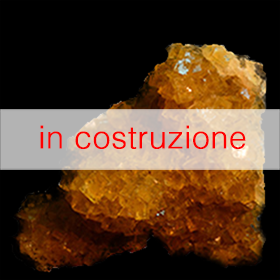
<style>
.page{position:relative;width:280px;height:280px;background:#000000}
.page>*{position:absolute;margin:0}
.t1{font:31.5px "Helvetica-Light";color:#ff0000;font-weight:bold}
</style>
<div class="page">
<p class="t1" style="left:40px;top:125px;width:206px;height:24px">in costruzione</p>
</div>
